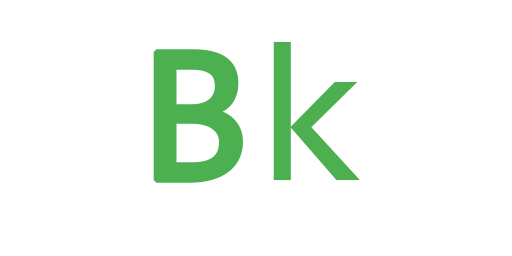
<style>
.page{position:relative;width:512px;height:256px;background:#ffffff}
.page>*{position:absolute;margin:0}
.t1{font:200px "Consolas";color:#4caf50;font-weight:bold}
.t2{font:200px "Consolas";color:#ffffff;font-weight:bold}
</style>
<div class="page">
<p class="t1" style="left:36px;top:41px;width:434px;height:145px"><span class="t2">&lt;</span>Bk<span class="t2">&gt;</span></p>
</div>
